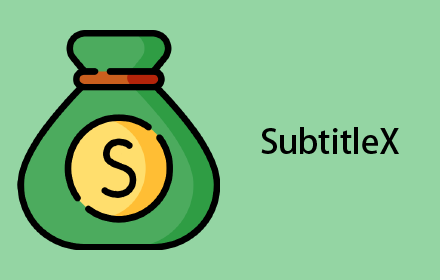
<style>
.page{position:relative;width:440px;height:280px;background:#94d5a3}
.page>*{position:absolute;margin:0}
.t1{font:33.6px "AdobeHeitiStd-Regular";color:#000000}
</style>
<div class="page">
<p class="t1" style="left:261px;top:127px;width:138px;height:27px">SubtitleX</p>
</div>
